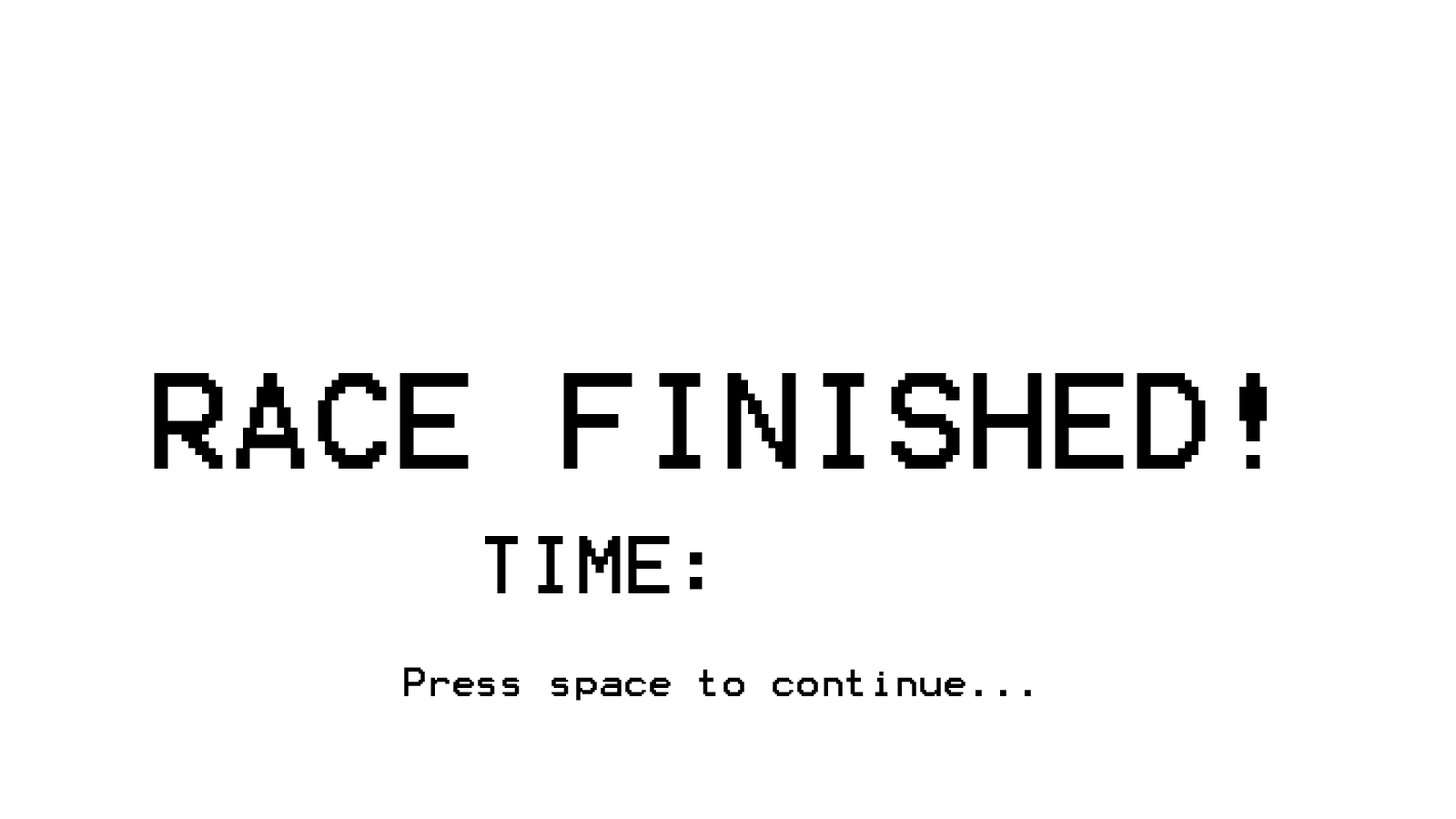
<style>
.page{position:relative;width:1456px;height:819px;background:#ffffff}
.page>*{position:absolute;margin:0}
.t1{font:109.2px "Terminal";color:#000000}
.t2{font:65.5px "Terminal";color:#000000}
.t3{font:32.8px "Terminal";color:#000000}
</style>
<div class="page">
<p class="t1" style="left:154px;top:373px;width:1113px;height:96px">RACE FINISHED!</p>
<p class="t2" style="left:485px;top:536px;width:218px;height:57px">TIME:</p>
<p class="t3" style="left:404px;top:667px;width:627px;height:34px">Press space to continue...</p>
</div>
